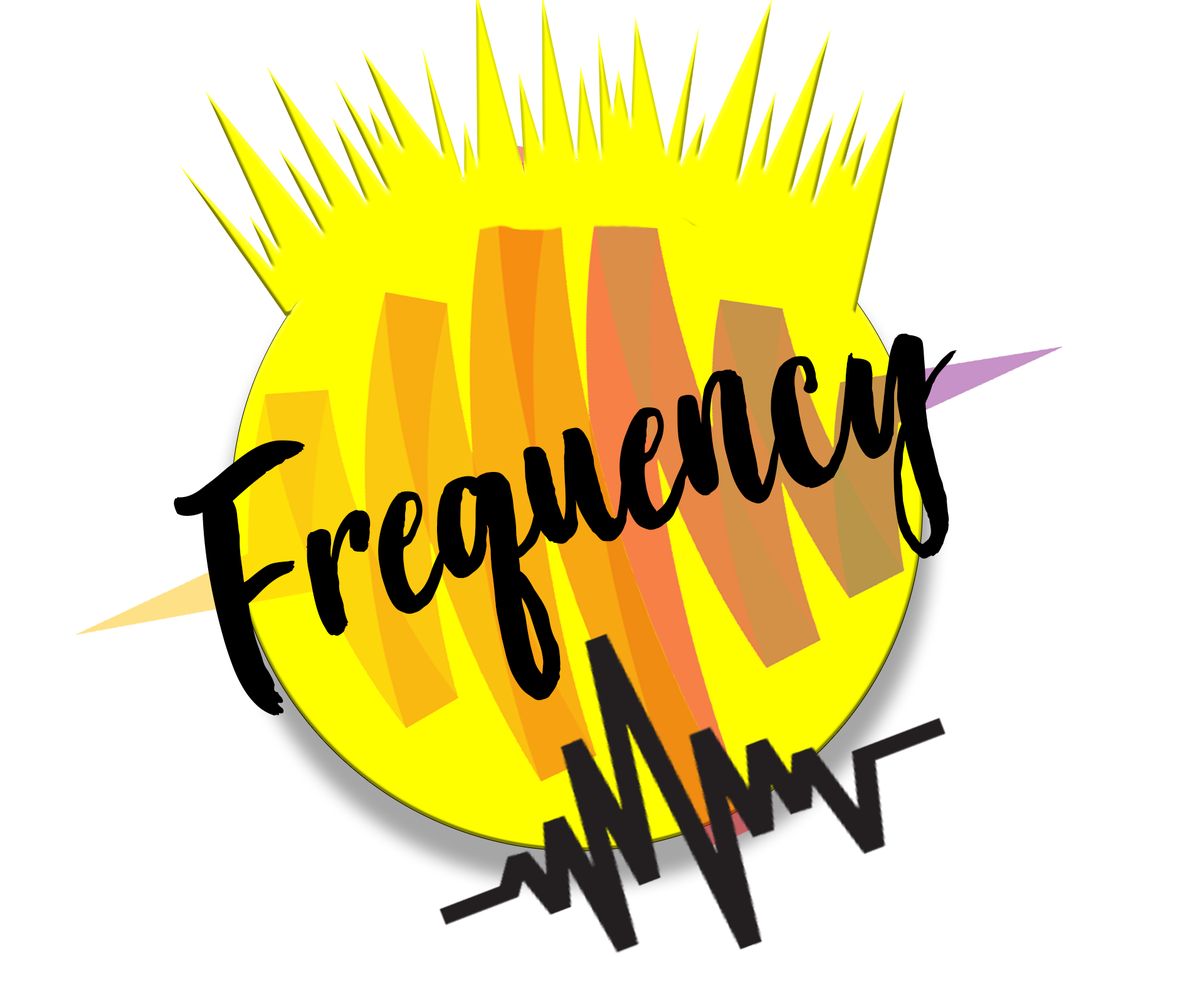
<style>
.page{position:relative;width:1185px;height:1006px;background:#ffffff}
.page>*{position:absolute;margin:0}
.t1{font:303px "GoodVibes";color:#000000}
</style>
<div class="page">
<p class="t1" style="left:174px;top:334px;width:783px;height:382px;rotate:-19deg">Frequency</p>
</div>
